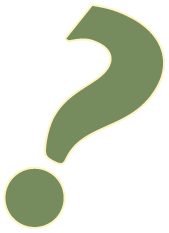
<style>
.page{position:relative;width:169px;height:233px;background:#ffffff}
.page>*{position:absolute;margin:0}
.t1{font:332.3px "GillSans-Bold";color:#768c5e}
</style>
<div class="page">
<p class="t1" style="left:5px;top:6px;width:158px;height:221px;rotate:27deg">?</p>
</div>
